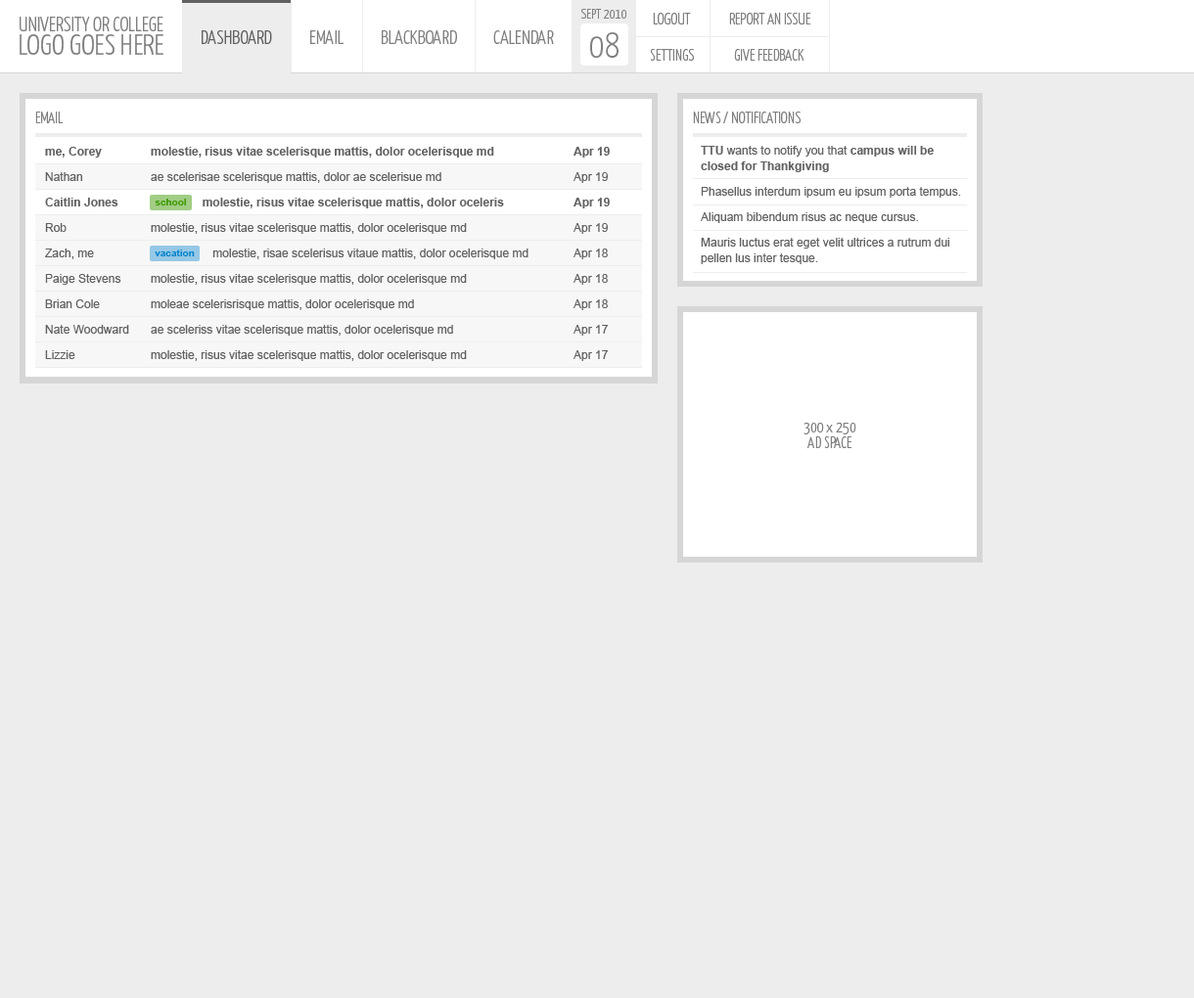
<style>
.page{position:relative;width:1194px;height:998px;background:#ededed}
.page>*{position:absolute;margin:0}
.t1{font:20.3px "YanoneKaffeesatz-Light";color:#7f7f7f}
.t2{font:13.7px "YanoneKaffeesatz-Light";color:#7f7f7f}
.t3{font:15.7px "YanoneKaffeesatz-Light";color:#7f7f7f}
.t4{font:19.6px "YanoneKaffeesatz-Light";color:#616161}
.t5{font:19.6px "YanoneKaffeesatz-Light";color:#7f7f7f}
.t6{font:29.4px "YanoneKaffeesatz-Light";color:#7f7f7f}
.t7{font:35.2px "YanoneKaffeesatz-Light";color:#7f7f7f}
.t8{font:11.7px/25.5px "ArialMT";color:#616161}
.t9{font:11.7px/25.5px "Arial-BoldMT";color:#616161}
.t10{font:11.7px/15.7px "Arial-BoldMT";color:#616161}
.t11{font:11.7px/15.7px "ArialMT";color:#616161}
.t12{font:9.8px "Arial-BoldMT";color:#3c9700}
.t13{font:9.8px "Arial-BoldMT";color:#0080ca}
.t14{font:15.7px/15.7px "YanoneKaffeesatz-Light";color:#7f7f7f}
</style>
<div class="page">
<p class="t1" style="left:20px;top:17px;width:143px;height:14px">UNIVERSITY OR COLLEGE</p>
<p class="t2" style="left:581px;top:9px;width:45px;height:10px">SEPT 2010</p>
<p class="t3" style="left:653px;top:13px;width:38px;height:11px">LOGOUT</p>
<p class="t3" style="left:729px;top:13px;width:83px;height:11px">REPORT AN ISSUE</p>
<p class="t4" style="left:202px;top:29px;width:70px;height:15px">DASHBOARD</p>
<p class="t5" style="left:310px;top:29px;width:34px;height:15px">EMAIL</p>
<p class="t5" style="left:382px;top:29px;width:75px;height:15px">BLACKBOARD</p>
<p class="t5" style="left:493px;top:29px;width:61px;height:15px">CALENDAR</p>
<p class="t6" style="left:20px;top:34px;width:143px;height:21px">LOGO GOES HERE</p>
<p class="t7" style="left:590px;top:32px;width:29px;height:26px">08</p>
<p class="t3" style="left:650px;top:49px;width:44px;height:12px">SETTINGS</p>
<p class="t3" style="left:734px;top:49px;width:71px;height:12px">GIVE FEEDBACK</p>
<p class="t3" style="left:35px;top:112px;width:29px;height:11px">EMAIL</p>
<p class="t3" style="left:693px;top:112px;width:108px;height:11px">NEWS / NOTIFICATIONS</p>
<p class="t8" style="left:45px;top:147px;width:565px;height:214px"><span class="t9">me, Corey  molestie, risus vitae scelerisque mattis, dolor ocelerisque md   Apr 19<br></span>Nathan  ae scelerisae scelerisque mattis, dolor ae scelerisue md    Apr 19<br><span class="t9">Caitlin Jones       molestie, risus vitae scelerisque mattis, dolor oceleris  Apr 19<br></span>Rob   molestie, risus vitae scelerisque mattis, dolor ocelerisque md    Apr 19<br>Zach, me                     molestie, risae scelerisus vitaue mattis, dolor ocelerisque md  Apr 18<br>Paige Stevens molestie, risus vitae scelerisque mattis, dolor ocelerisque md    Apr 18<br>Brian Cole  moleae scelerisrisque mattis, dolor ocelerisque md     Apr 18<br>Nate Woodward ae sceleriss vitae scelerisque mattis, dolor ocelerisque md    Apr 17<br>Lizzie   molestie, risus vitae scelerisque mattis, dolor ocelerisque md    Apr 17</p>
<p class="t8" style="left:701px;top:146px;width:260px;height:118px"><span class="t9">TTU</span> wants to notify you that <span class="t9">campus will be </span><span class="t10">closed for Thankgiving<br></span>Phasellus interdum ipsum eu ipsum porta <span class="t11">tempus.<br></span>Aliquam bibendum risus ac neque cursus.<br>Mauris luctus erat eget velit ultrices a rutrum <span class="t11">dui pellen lus inter tesque.</span></p>
<p class="t12" style="left:155px;top:199px;width:31px;height:7px">school</p>
<p class="t13" style="left:155px;top:250px;width:40px;height:6px">vacation</p>
<p class="t14" style="left:804px;top:423px;width:53px;height:25px;text-align:center">300 x 250<br>AD SPACE</p>
</div>
